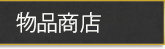
<style>
.page{position:relative;width:165px;height:49px}
.page>*{position:absolute;margin:0}
.t1{font:22px "GothicMB101Pr6N-Light";color:#fbfbf9}
</style>
<div class="page">
<p class="t1" style="left:16px;top:12px;width:85px;height:21px">物品商店</p>
</div>
